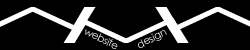
<style>
.page{position:relative;width:250px;height:50px;background:#000000}
.page>*{position:absolute;margin:0}
.t1{font:35.2px "CenturyGothic";letter-spacing:-0.025em;color:#ffffff;scale:4.38 1}
.t2{font:10.3px "CenturyGothic";letter-spacing:-0.025em}
.t3{font:10.3px "CenturyGothic";letter-spacing:-0.025em;color:#ffffff}
</style>
<div class="page">
<p class="t1" style="left:63px;top:17px;width:126px;height:26px">M</p>
<p class="t2" style="left:85px;top:29px;width:33px;height:20px;rotate:26deg">website</p>
<p class="t3" style="left:138px;top:30px;width:29px;height:18px;rotate:-27deg">design</p>
</div>
